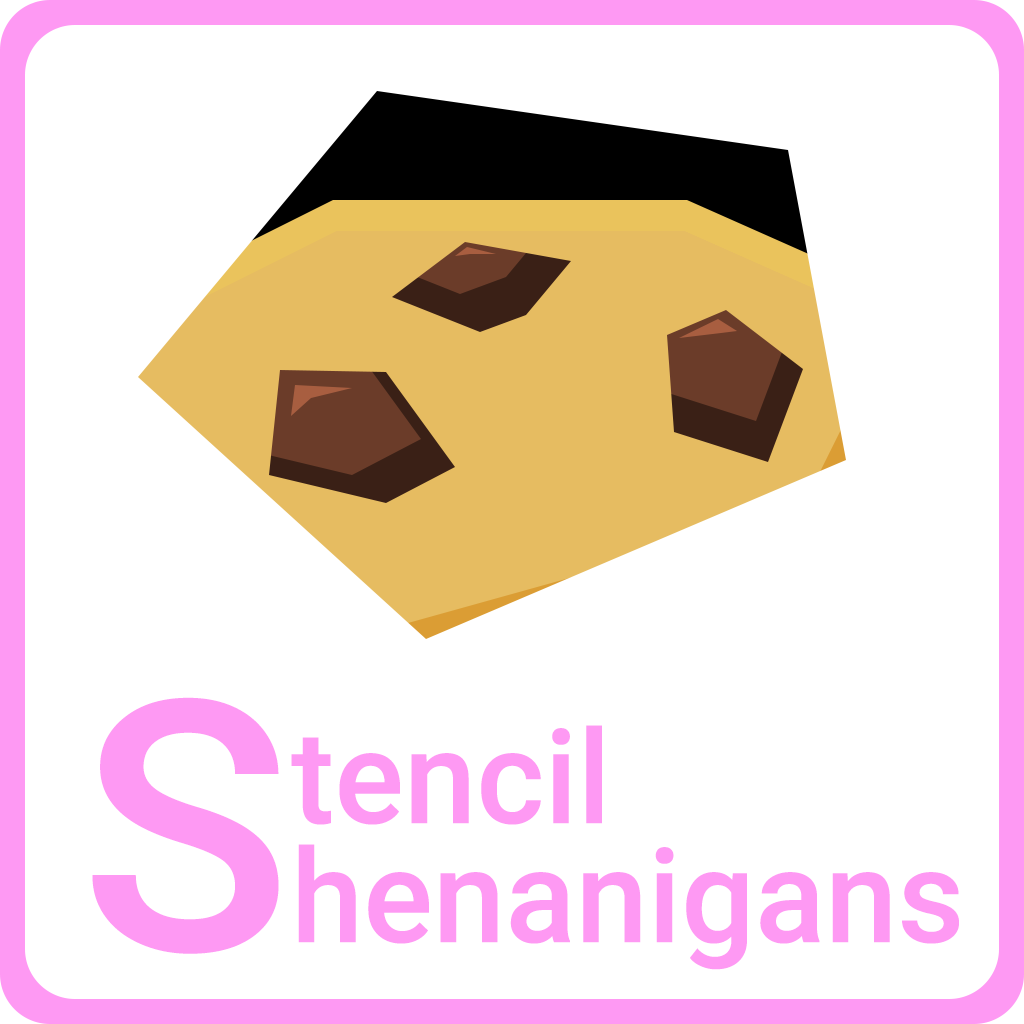
<style>
.page{position:relative;width:1024px;height:1024px;background:#ffffff}
.page>*{position:absolute;margin:0}
.t1{font:350px "Roboto-Medium";color:#fe99f3}
.t2{font:130px "Roboto-Medium";color:#fe99f3}
</style>
<div class="page">
<p class="t1" style="left:92px;top:697px;width:187px;height:257px">S</p>
<p class="t2" style="left:291px;top:725px;width:311px;height:100px">tencil</p>
<p class="t2" style="left:298px;top:844px;width:661px;height:126px">henanigans</p>
</div>
